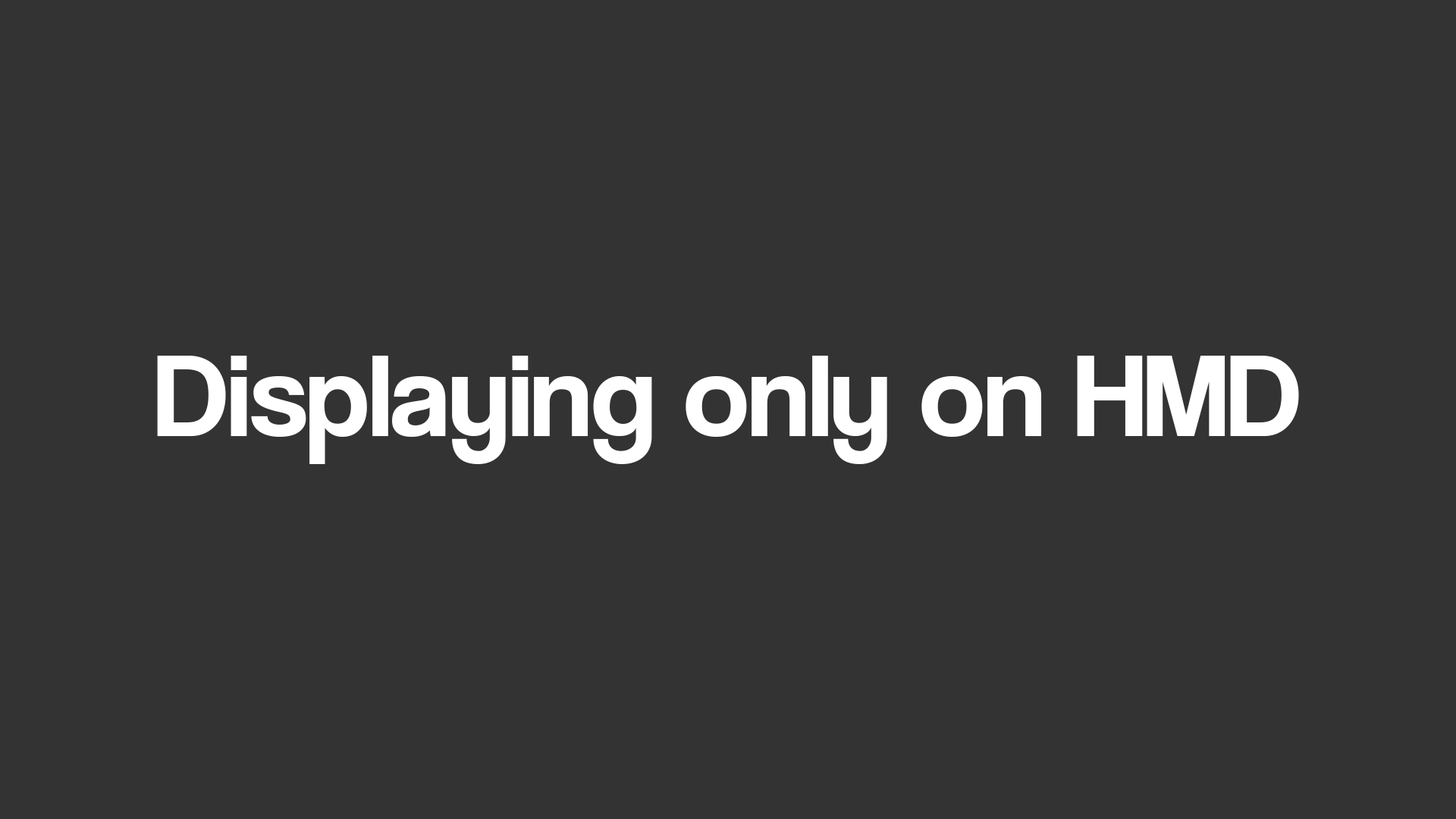
<style>
.page{position:relative;width:1456px;height:819px;background:#333333}
.page>*{position:absolute;margin:0}
.t1{font:120.6px "CoolveticaRg-Regular";color:#ffffff}
</style>
<div class="page">
<p class="t1" style="left:157px;top:356px;width:1142px;height:108px">Displaying only on HMD</p>
</div>
